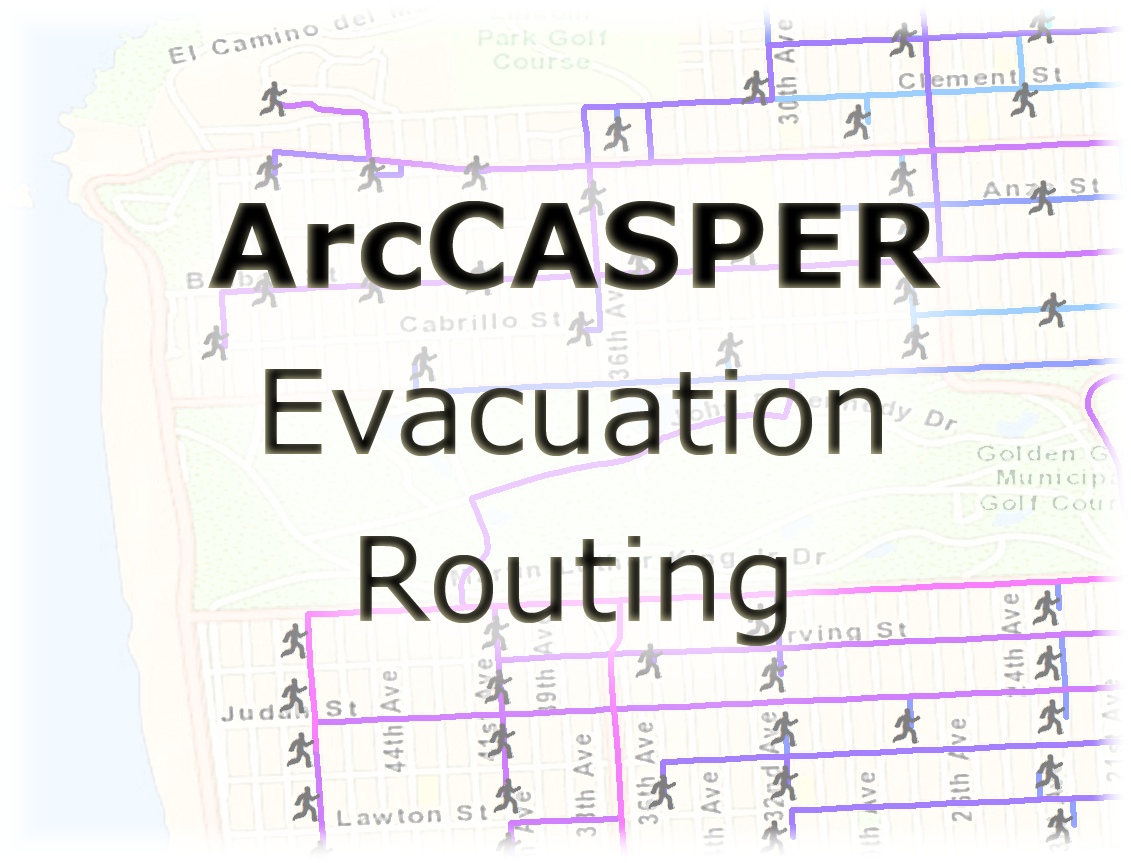
<style>
.page{position:relative;width:1131px;height:863px}
.page>*{position:absolute;margin:0}
.t1{font:116.7px/166.7px "Verdana"}
.t2{font:116.7px/166.7px "Verdana-Bold"}
</style>
<div class="page">
<p class="t1" style="left:208px;top:201px;width:733px;height:445px;text-align:center"><span class="t2">ArcCASPER<br></span>Evacuation<br>Routing</p>
</div>
